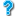
<style>
.page{position:relative;width:16px;height:16px;background:#ffffff}
.page>*{position:absolute;margin:0}
.t1{font:20px "FranklinGothic-MediumCond";color:#0099d9}
</style>
<div class="page">
<p class="t1" style="left:4px;top:1px;width:8px;height:13px">?</p>
</div>
